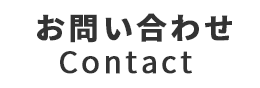
<style>
.page{position:relative;width:260px;height:88px;background:#ffffff}
.page>*{position:absolute;margin:0}
.t1{font:30px "SourceHanSansJP-Bold";letter-spacing:0.1em;color:#333333;font-weight:bold}
.t2{font:30px "SourceHanSansJP-Regular";letter-spacing:0.1em;color:#333333;font-weight:bold}
</style>
<div class="page">
<p class="t1" style="left:37px;top:13px;width:195px;height:30px">お問い合わせ</p>
<p class="t2" style="left:60px;top:51px;width:132px;height:23px">Contact</p>
</div>
